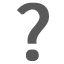
<style>
.page{position:relative;width:64px;height:64px;background:#ffffff}
.page>*{position:absolute;margin:0}
.t1{font:82.4px "SourceSansPro-Regular";color:#595959;font-weight:bold;scale:1.04 1}
</style>
<div class="page">
<p class="t1" style="left:17px;top:2px;width:32px;height:59px">?</p>
</div>
